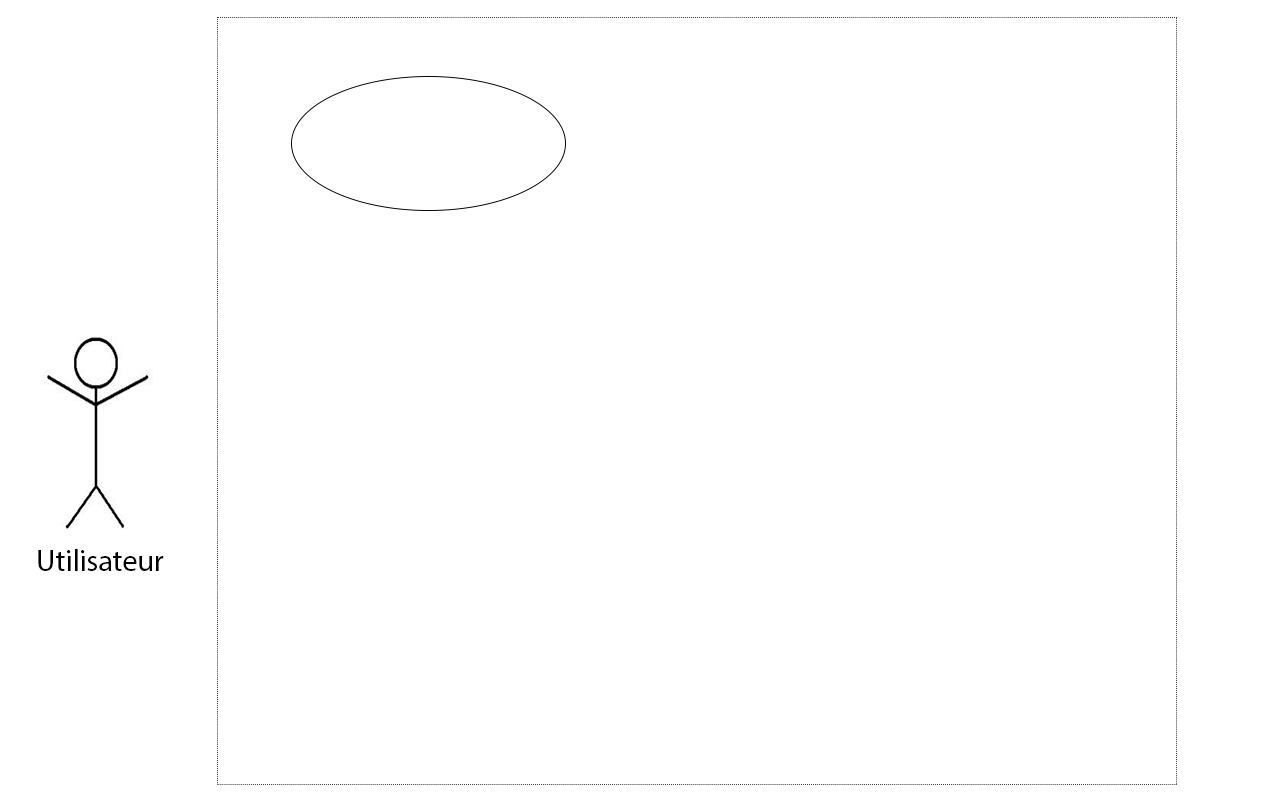
<style>
.page{position:relative;width:1280px;height:800px;background:#ffffff}
.page>*{position:absolute;margin:0}
.t1{font:30px "MyriadPro-Regular";color:#000000}
</style>
<div class="page">
<p class="t1" style="left:38px;top:549px;width:126px;height:22px">Utilisateur</p>
</div>
